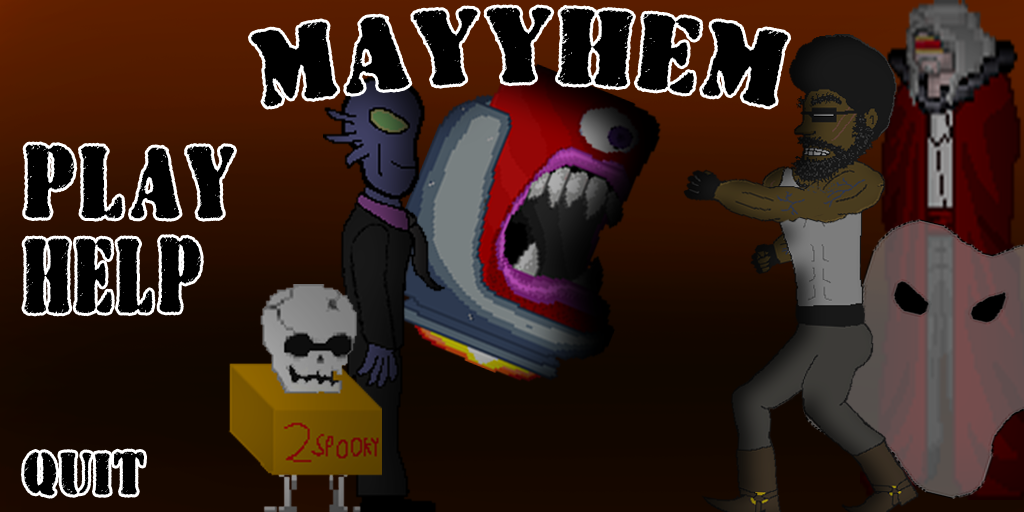
<style>
.page{position:relative;width:1024px;height:512px}
.page>*{position:absolute;margin:0}
.t1{font:75px "Wartorn";color:#000000}
.t2{font:71.8px "Wartorn";color:#000000;scale:0.81 1}
.t3{font:41.7px "Wartorn";color:#000000;scale:0.86 1}
</style>
<div class="page">
<p class="t1" style="left:250px;top:7px;width:539px;height:100px">MAYYHEM</p>
<p class="t2" style="left:25px;top:144px;width:209px;height:75px">PLAy</p>
<p class="t3" style="left:23px;top:451px;width:121px;height:45px">QUIT</p>
</div>
